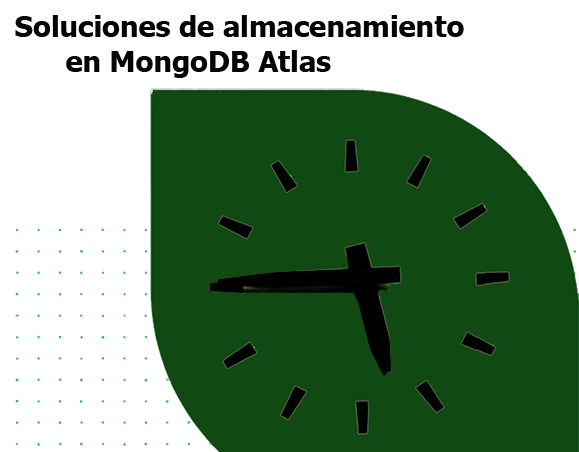
<style>
.page{position:relative;width:579px;height:452px;background:#104911}
.page>*{position:absolute;margin:0}
.t1{font:28.9px "Tahoma-Bold";color:#050505}
</style>
<div class="page">
<p class="t1" style="left:15px;top:15px;width:449px;height:63px">Soluciones de almacenamiento<br>      en MongoDB Atlas</p>
</div>
